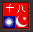
<style>
.page{position:relative;width:33px;height:32px;background:#f20000}
.page>*{position:absolute;margin:0}
.t1{font:10.4px "SimSun";color:#ffffff}
</style>
<div class="page">
<p class="t1" style="left:6px;top:4px;width:19px;height:9px">十八</p>
</div>
